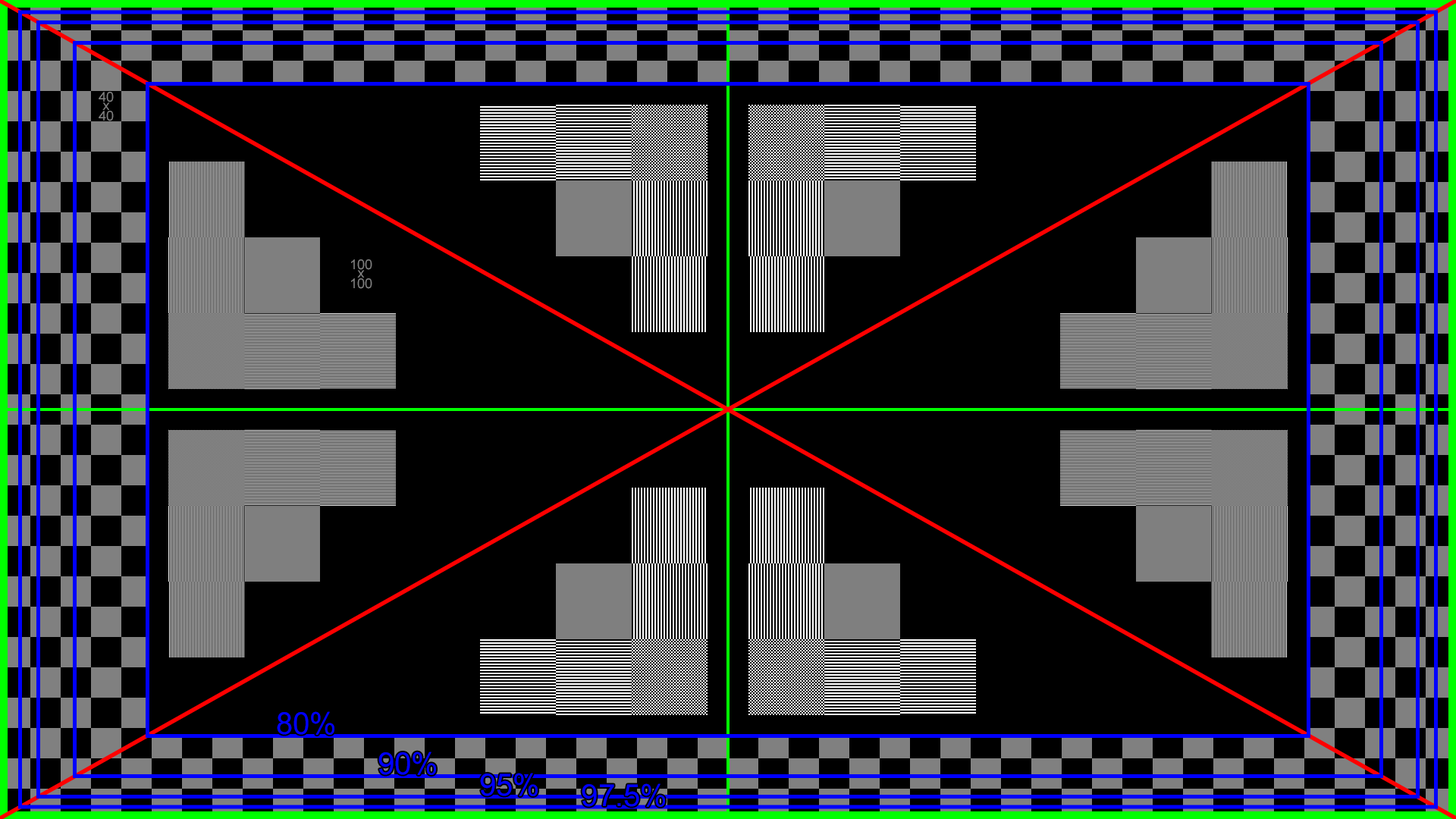
<style>
.page{position:relative;width:1456px;height:819px;background:#000000}
.page>*{position:absolute;margin:0}
.t1{font:13.6px/10.6px "ArialMT";color:#7f7f7f}
.t2{font:13.6px/8.3px "ArialMT";color:#7f7f7f}
.t3{font:30.3px "ArialMT";color:#0000ff}
</style>
<div class="page">
<p class="t1" style="left:99px;top:92px;width:15px;height:29px;text-align:center">40<br><span class="t2">x<br></span>40</p>
<p class="t1" style="left:351px;top:259px;width:21px;height:30px;text-align:center">100<br><span class="t2">x<br></span>100</p>
<p class="t3" style="left:277px;top:711px;width:57px;height:24px">80%</p>
<p class="t3" style="left:378px;top:751px;width:58px;height:24px">90%</p>
<p class="t3" style="left:480px;top:773px;width:58px;height:23px">95%</p>
<p class="t3" style="left:582px;top:783px;width:83px;height:24px">97.5%</p>
</div>
